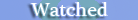
<style>
.page{position:relative;width:138px;height:20px}
.page>*{position:absolute;margin:0}
.t1{font:20px "PlantagenetCherokee";color:#ffffff}
</style>
<div class="page">
<p class="t1" style="left:30px;top:2px;width:78px;height:14px">Watched</p>
</div>
